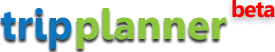
<style>
.page{position:relative;width:275px;height:52px;background:#ffffff}
.page>*{position:absolute;margin:0}
.t1{font:23px "Leelawadee-Bold";letter-spacing:-0.05em;color:#ff0000}
.t2{font:42px "Leelawadee-Bold";color:#0e74bb}
.t3{font:42px "Leelawadee-Bold";color:#8cc63f}
</style>
<div class="page">
<p class="t1" style="left:232px;top:0px;width:43px;height:18px">beta</p>
<p class="t2" style="left:0px;top:8px;width:72px;height:41px">trip</p>
<p class="t3" style="left:76px;top:8px;width:151px;height:41px">planner</p>
</div>
